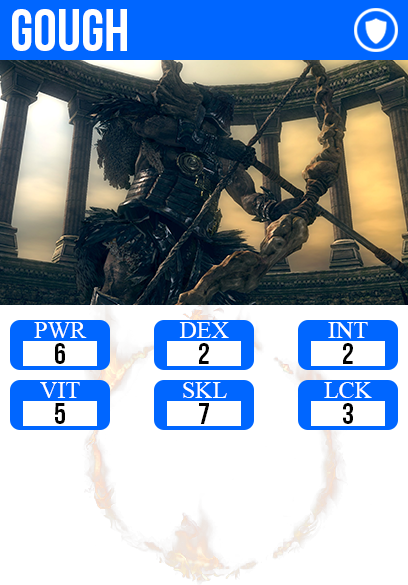
<style>
.page{position:relative;width:408px;height:585px;background:#ffffff}
.page>*{position:absolute;margin:0}
.t1{font:60px "BebasNeue";color:#ffffff}
.t2{font:24px "TimesNewRomanPSMT";color:#ffffff}
.t3{font:30px "BebasNeue";color:#000000}
</style>
<div class="page">
<p class="t1" style="left:12px;top:9px;width:115px;height:42px">gough</p>
<p class="t2" style="left:34px;top:322px;width:53px;height:16px">PWR</p>
<p class="t2" style="left:179px;top:322px;width:50px;height:16px">DEX</p>
<p class="t2" style="left:328px;top:322px;width:40px;height:17px">INT</p>
<p class="t3" style="left:55px;top:343px;width:10px;height:21px">6</p>
<p class="t3" style="left:199px;top:343px;width:10px;height:21px">2</p>
<p class="t3" style="left:343px;top:343px;width:10px;height:21px">2</p>
<p class="t2" style="left:40px;top:382px;width:40px;height:16px">VIT</p>
<p class="t2" style="left:183px;top:382px;width:44px;height:16px">SKL</p>
<p class="t2" style="left:324px;top:382px;width:48px;height:16px">LCK</p>
<p class="t3" style="left:55px;top:403px;width:10px;height:21px">5</p>
<p class="t3" style="left:199px;top:403px;width:10px;height:21px">7</p>
<p class="t3" style="left:343px;top:403px;width:10px;height:21px">3</p>
</div>
